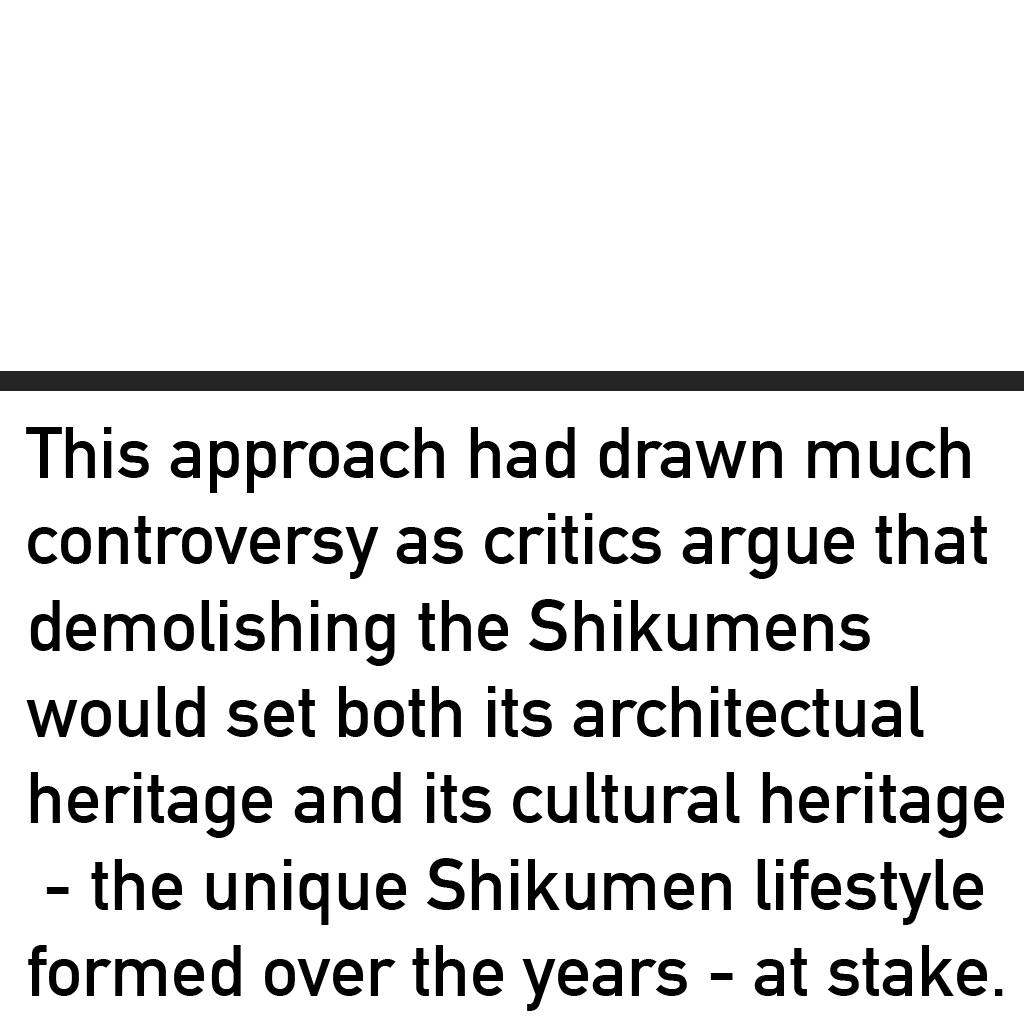
<style>
.page{position:relative;width:1024px;height:1024px;background:#ffffff}
.page>*{position:absolute;margin:0}
.t1{font:72px "DINAlternate-Bold";color:#000000}
</style>
<div class="page">
<p class="t1" style="left:26px;top:427px;width:978px;height:584px">This approach had drawn much<br>controversy as critics argue that<br>demolishing the Shikumens<br>would set both its architectual <br>heritage and its cultural heritage<br> - the unique Shikumen lifestyle<br>formed over the years - at stake.</p>
</div>
